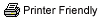
<style>
.page{position:relative;width:100px;height:20px;background:#ffffff}
.page>*{position:absolute;margin:0}
.t1{font:11px "ArialMT";color:#030001}
</style>
<div class="page">
<p class="t1" style="left:23px;top:6px;width:75px;height:12px">Printer Friendly</p>
</div>
